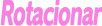
<style>
.page{position:relative;width:102px;height:26px;background:#ffffff}
.page>*{position:absolute;margin:0}
.t1{font:32px "RodinPro-EB";letter-spacing:-0.054em;color:#f880de;font-style:italic;scale:0.61 1}
</style>
<div class="page">
<p class="t1" style="left:0px;top:0px;width:103px;height:26px">Rotacionar</p>
</div>
